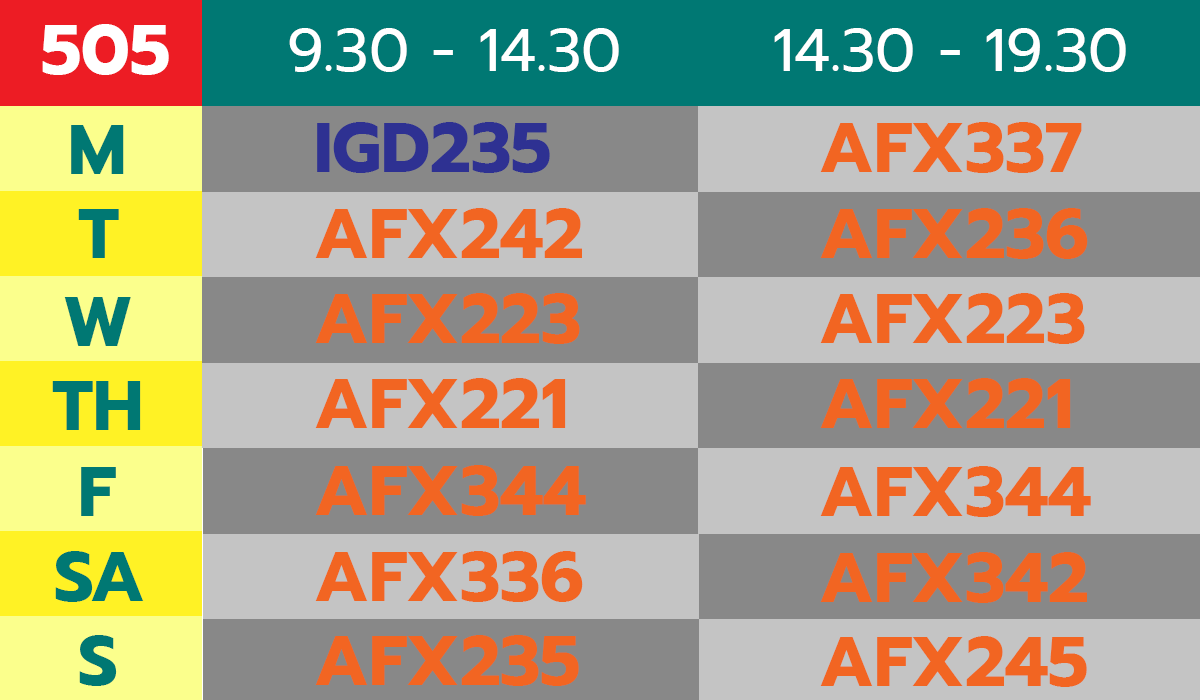
<style>
.page{position:relative;width:1200px;height:700px;background:#c4c4c4}
.page>*{position:absolute;margin:0}
.t1{font:70px "Prompt-Bold";color:#ffffff}
.t2{font:60px "Prompt-Regular";color:#ffffff}
.t3{font:70px "Prompt-Bold";color:#007873}
.t4{font:70px "Prompt-Bold";color:#2e3192}
.t5{font:70px "Prompt-Bold";color:#f26522}
</style>
<div class="page">
<p class="t1" style="left:42px;top:24px;width:127px;height:51px">505</p>
<p class="t2" style="left:289px;top:28px;width:330px;height:44px">9.30 - 14.30</p>
<p class="t2" style="left:774px;top:28px;width:352px;height:44px">14.30 - 19.30</p>
<p class="t3" style="left:71px;top:125px;width:53px;height:49px">M</p>
<p class="t4" style="left:317px;top:122px;width:233px;height:51px">IGD235</p>
<p class="t5" style="left:820px;top:122px;width:262px;height:51px">AFX337</p>
<p class="t3" style="left:78px;top:209px;width:41px;height:49px">T</p>
<p class="t5" style="left:315px;top:208px;width:267px;height:50px">AFX242</p>
<p class="t5" style="left:820px;top:208px;width:268px;height:51px">AFX236</p>
<p class="t5" style="left:315px;top:293px;width:265px;height:51px">AFX223</p>
<p class="t5" style="left:820px;top:293px;width:265px;height:51px">AFX223</p>
<p class="t3" style="left:64px;top:297px;width:67px;height:49px">W</p>
<p class="t3" style="left:52px;top:381px;width:89px;height:49px">TH</p>
<p class="t5" style="left:315px;top:378px;width:251px;height:50px">AFX221</p>
<p class="t5" style="left:820px;top:378px;width:251px;height:50px">AFX221</p>
<p class="t3" style="left:81px;top:467px;width:35px;height:49px">F</p>
<p class="t5" style="left:315px;top:465px;width:271px;height:51px">AFX344</p>
<p class="t5" style="left:820px;top:466px;width:271px;height:51px">AFX344</p>
<p class="t3" style="left:55px;top:551px;width:89px;height:51px">SA</p>
<p class="t5" style="left:315px;top:551px;width:268px;height:51px">AFX336</p>
<p class="t5" style="left:820px;top:552px;width:267px;height:51px">AFX342</p>
<p class="t3" style="left:79px;top:635px;width:38px;height:51px">S</p>
<p class="t5" style="left:315px;top:635px;width:264px;height:51px">AFX235</p>
<p class="t5" style="left:820px;top:636px;width:267px;height:51px">AFX245</p>
</div>
